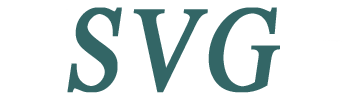
<style>
.page{position:relative;width:350px;height:100px;background:#ffffff}
.page>*{position:absolute;margin:0}
.t1{font:120px "TimesNewRomanPSMT";letter-spacing:0.025em;color:#336666;font-weight:bold;font-style:italic;scale:0.83 1}
</style>
<div class="page">
<p class="t1" style="left:67px;top:7px;width:213px;height:86px">SVG</p>
</div>
